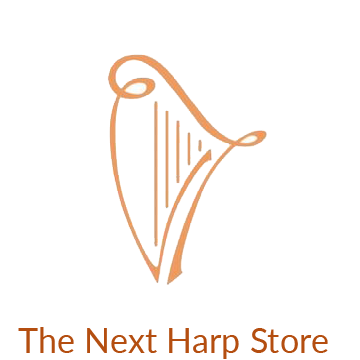
<style>
.page{position:relative;width:360px;height:360px;background:#ffffff}
.page>*{position:absolute;margin:0}
.t1{font:34.4px "Lato-Regular";color:#b44e10}
</style>
<div class="page">
<p class="t1" style="left:18px;top:327px;width:310px;height:32px">The Next Harp Store</p>
</div>
